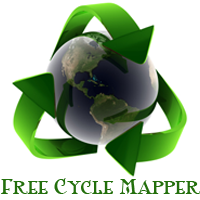
<style>
.page{position:relative;width:200px;height:200px;background:#ffffff}
.page>*{position:absolute;margin:0}
.t1{font:18px "ShangriLaNFSmallCaps";color:#236f0c}
</style>
<div class="page">
<p class="t1" style="left:1px;top:178px;width:200px;height:16px">Free Cycle Mapper</p>
</div>
